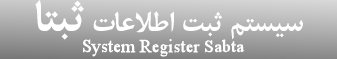
<style>
.page{position:relative;width:337px;height:59px}
.page>*{position:absolute;margin:0}
.t1{font:30px "2--Mitra_1-(MRT)Bold";color:#ffffff}
.t2{font:48px "2--Mitra_1-(MRT)Bold";color:#ffffff}
.t3{font:18px "TimesNewRomanPSMT";color:#ffffff}
</style>
<div class="page">
<p class="t1" style="left:35px;top:0px;width:268px;height:40px">سيستم ثبت اطلاعات <span class="t2">ثبتا</span></p>
<p class="t3" style="left:83px;top:39px;width:162px;height:18px">System Register Sabta</p>
</div>
